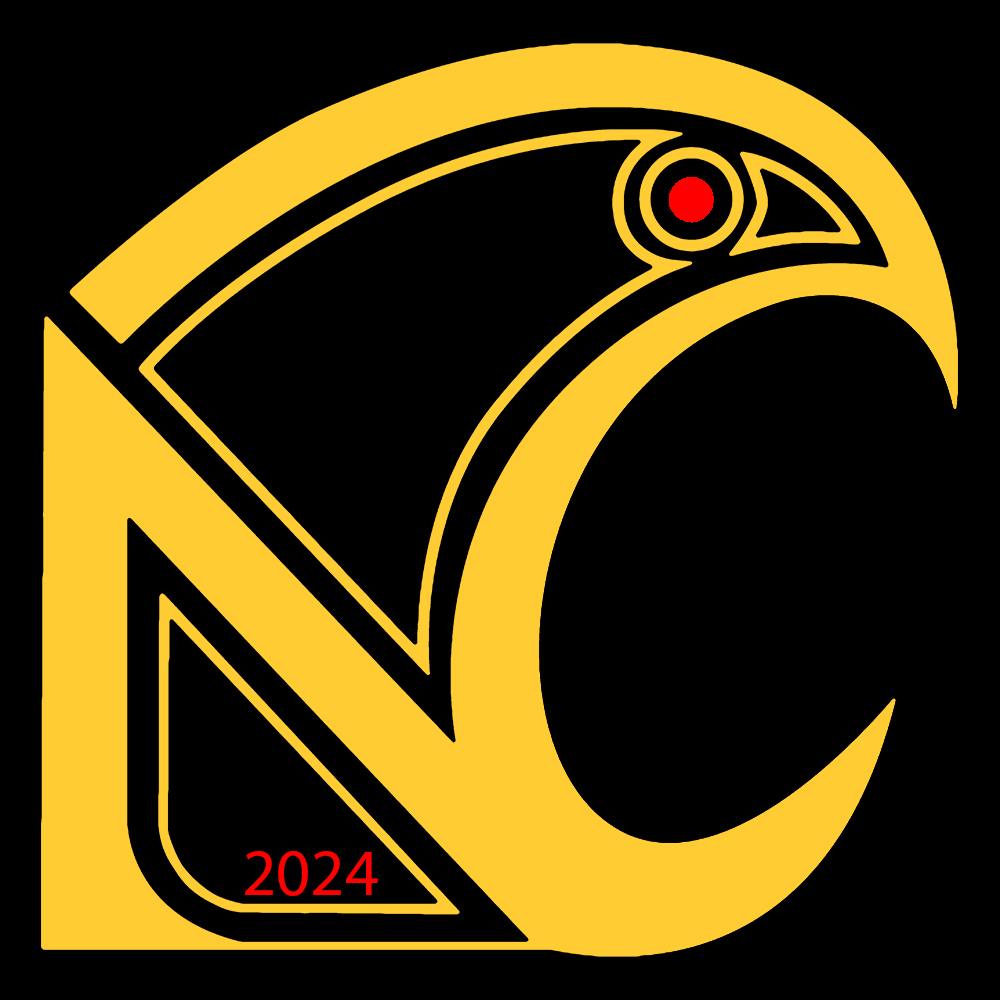
<style>
.page{position:relative;width:1000px;height:1000px;background:#000000}
.page>*{position:absolute;margin:0}
.t1{font:66.7px "MyriadPro-Regular";color:#ff0000}
</style>
<div class="page">
<p class="t1" style="left:245px;top:851px;width:133px;height:45px">2024</p>
</div>
